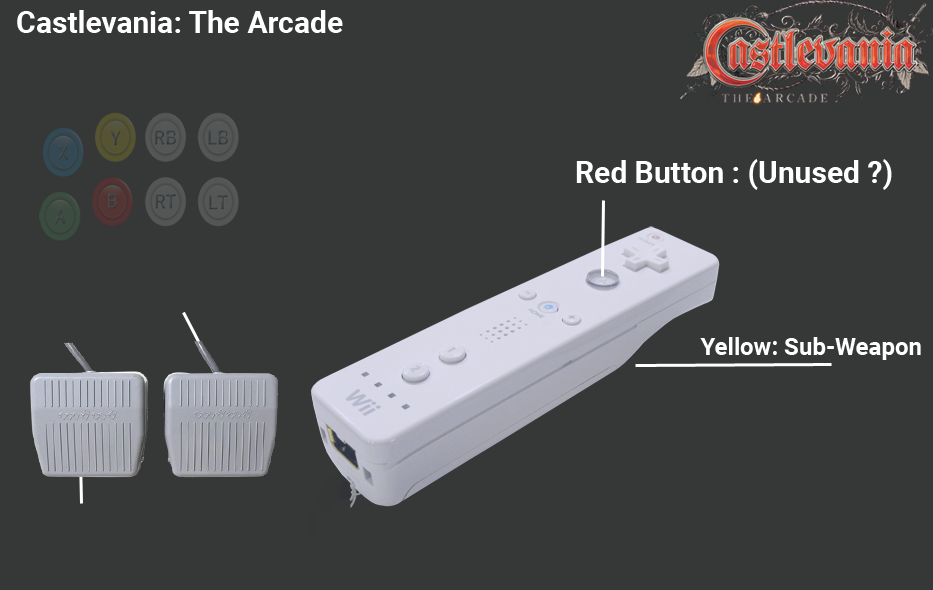
<style>
.page{position:relative;width:933px;height:590px;background:#363838}
.page>*{position:absolute;margin:0}
.t1{font:30px "Roboto-Bold";color:#ffffff}
.t2{font:24px "Roboto-Bold";color:#ffffff}
</style>
<div class="page">
<p class="t1" style="left:17px;top:10px;width:326px;height:23px">Castlevania: The Arcade</p>
<p class="t1" style="left:576px;top:159px;width:316px;height:31px">Red Button : (Unused ?)</p>
<p class="t2" style="left:700px;top:337px;width:221px;height:23px">Yellow: Sub-Weapon</p>
</div>
